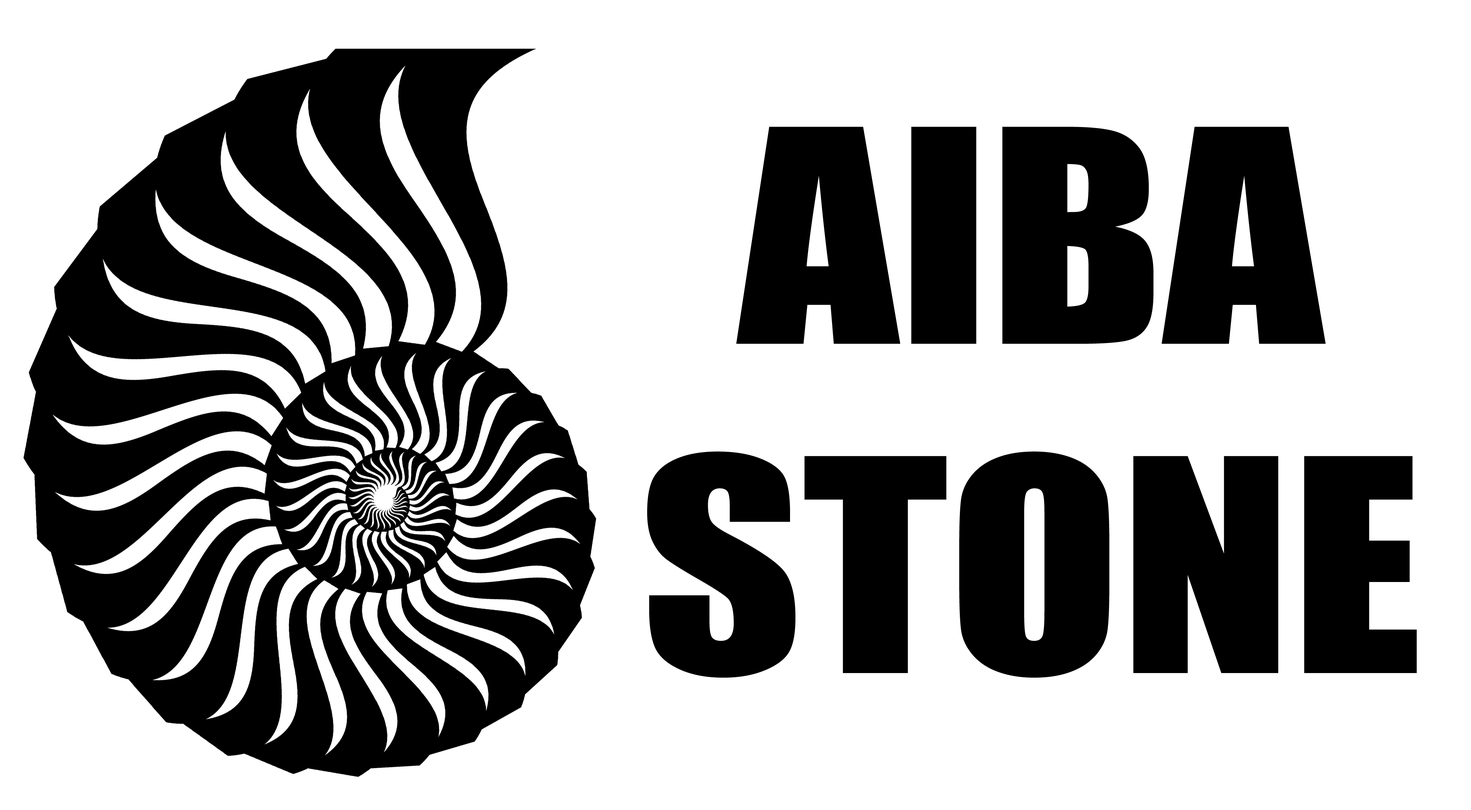
<style>
.page{position:relative;width:1471px;height:810px;background:#ffffff}
.page>*{position:absolute;margin:0}
.t1{font:274.6px "Impact";color:#000000;scale:1.15 1}
</style>
<div class="page">
<p class="t1" style="left:647px;top:127px;width:770px;height:551px;text-align:center">AIBA<br>STONE</p>
</div>
